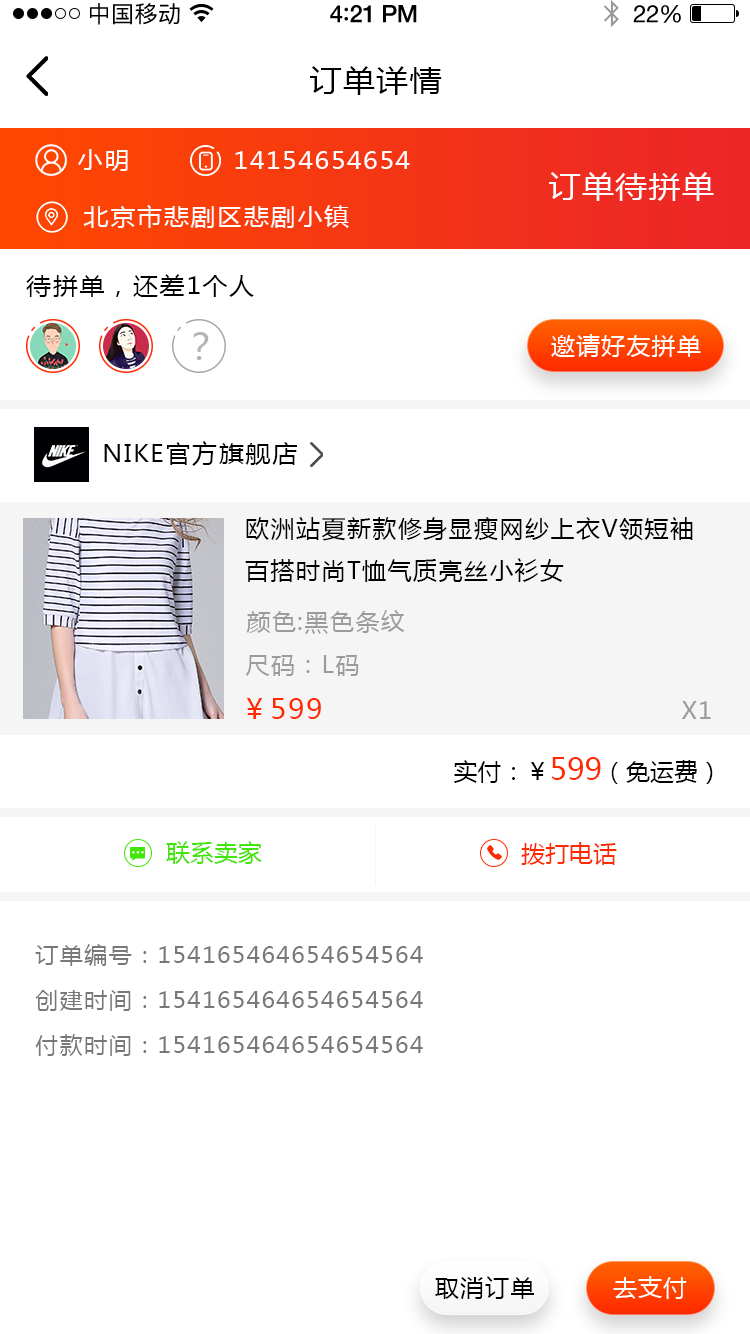
<style>
.page{position:relative;width:750px;height:1334px;background:#ffffff}
.page>*{position:absolute;margin:0}
.t1{font:23px "PingFangSC-Regular";letter-spacing:0.02em;color:#000000}
.t2{font:24px "HelveticaNeue-Medium";letter-spacing:-0.02em;color:#000000}
.t3{font:26px "Avenir-Medium";letter-spacing:-0.02em;color:#000000}
.t4{font:24px "HelveticaNeue";letter-spacing:-0.02em;color:#000000}
.t5{font:30px "MicrosoftYaHei";letter-spacing:0.05em;color:#000000;scale:1.06 1}
.t6{font:24px "MicrosoftYaHei";letter-spacing:0.05em;color:#ffffff;scale:1.06 1}
.t7{font:30px "MicrosoftYaHei";letter-spacing:0.05em;color:#ffffff;scale:1.06 1}
.t8{font:24px "MicrosoftYaHei";letter-spacing:0.05em;color:#000000;scale:1.06 1}
.t9{font:36px "MicrosoftYaHei";letter-spacing:0.05em;color:#b5b5b5;scale:1.06 1}
.t10{font:24px "MicrosoftYaHei";letter-spacing:0.05em;color:#ffffff;text-transform:uppercase}
.t11{font:24px "MicrosoftYaHei";letter-spacing:0.06em;color:#000000;text-transform:uppercase}
.t12{font:24px "MicrosoftYaHei";letter-spacing:0.06em;color:#9b9b9b;text-transform:uppercase}
.t13{font:28px "MicrosoftYaHei";letter-spacing:0.06em;color:#ff2a00;text-transform:uppercase}
.t14{font:24px "MicrosoftYaHei";color:#000000;text-transform:uppercase}
.t15{font:30px "MicrosoftYaHei";color:#ff2a00;text-transform:uppercase}
.t16{font:24px "MicrosoftYaHei";color:#41e507;text-transform:uppercase}
.t17{font:24px "MicrosoftYaHei";color:#ff2a00;text-transform:uppercase}
.t18{font:22px "MicrosoftYaHei";letter-spacing:0.05em;color:#787878;scale:1.06 1}
.t19{font:24px "MicrosoftYaHei";letter-spacing:0.05em;color:#000000;text-transform:uppercase}
</style>
<div class="page">
<p class="t1" style="left:90px;top:3px;width:90px;height:22px">中国移动</p>
<p class="t2" style="left:330px;top:5px;width:87px;height:18px">4<span class="t3">:</span>21 PM</p>
<p class="t4" style="left:633px;top:5px;width:48px;height:18px">22%</p>
<p class="t5" style="left:310px;top:66px;width:132px;height:29px">订单详情</p>
<p class="t6" style="left:78px;top:149px;width:50px;height:22px">小明</p>
<p class="t6" style="left:235px;top:151px;width:175px;height:18px">14154654654</p>
<p class="t7" style="left:549px;top:172px;width:165px;height:29px">订单待拼单</p>
<p class="t6" style="left:83px;top:205px;width:266px;height:23px">北京市悲剧区悲剧小镇</p>
<p class="t8" style="left:26px;top:274px;width:228px;height:23px">待拼单，还差1个人</p>
<p class="t9" style="left:193px;top:332px;width:16px;height:28px">？</p>
<p class="t10" style="left:551px;top:334px;width:150px;height:23px">邀请好友拼单</p>
<p class="t8" style="left:104px;top:441px;width:193px;height:25px">NIKE官方旗舰店</p>
<p class="t11" style="left:245px;top:517px;width:448px;height:65px">欧洲站夏新款修身显瘦网纱上衣v领短袖百搭时尚t恤气质亮丝小衫女</p>
<p class="t12" style="left:246px;top:610px;width:159px;height:24px">颜色:黑色条纹</p>
<p class="t12" style="left:245px;top:655px;width:114px;height:21px">尺码：L码</p>
<p class="t13" style="left:246px;top:698px;width:75px;height:21px">￥599</p>
<p class="t12" style="left:681px;top:701px;width:30px;height:18px">x1</p>
<p class="t14" style="left:454px;top:757px;width:259px;height:27px">实付：￥<span class="t15">599</span>（免运费）</p>
<p class="t16" style="left:166px;top:841px;width:96px;height:23px">联系卖家</p>
<p class="t17" style="left:521px;top:842px;width:96px;height:23px">拨打电话</p>
<p class="t18" style="left:35px;top:944px;width:388px;height:22px">订单编号：154165464654654564</p>
<p class="t18" style="left:35px;top:990px;width:388px;height:21px">创建时间：154165464654654564</p>
<p class="t18" style="left:35px;top:1034px;width:388px;height:22px">付款时间：154165464654654564</p>
<p class="t19" style="left:435px;top:1276px;width:99px;height:23px">取消订单</p>
<p class="t10" style="left:613px;top:1276px;width:74px;height:23px">去支付</p>
</div>
